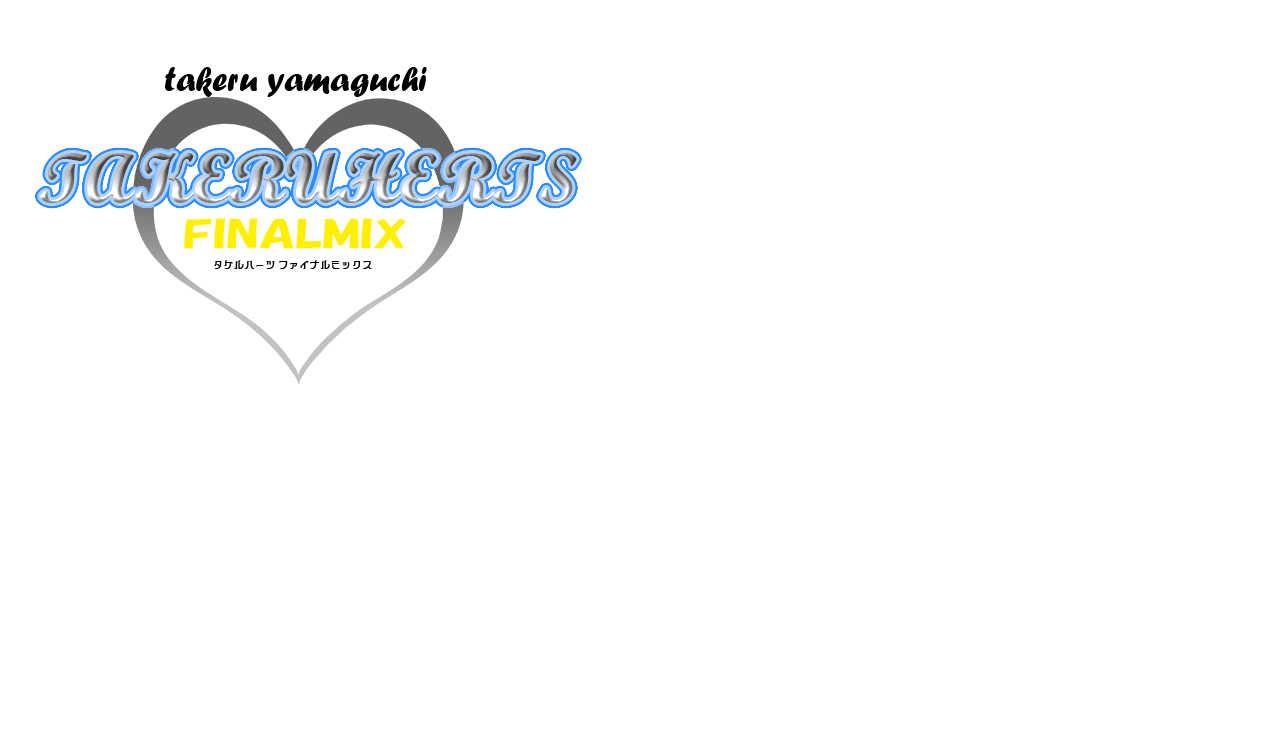
<style>
.page{position:relative;width:1280px;height:740px;background:#ffffff}
.page>*{position:absolute;margin:0}
.t1{font:35px "ForteMT";color:#000000}
.t2{font:70px "ScriptMTBold"}
.t3{font:36.2px "HGSSoeiKakupoptai";color:#fff000;scale:1.42 1}
.t4{font:10.5px "Kinkakuji-Normal";color:#000000}
</style>
<div class="page">
<p class="t1" style="left:165px;top:67px;width:262px;height:30px">takeru yamaguchi</p>
<p class="t2" style="left:40px;top:153px;width:537px;height:50px">TAKERUHERTS</p>
<p class="t3" style="left:184px;top:218px;width:222px;height:31px">FINALMIX</p>
<p class="t4" style="left:214px;top:260px;width:158px;height:9px">タケルハーツ ファイナルミックス</p>
</div>
